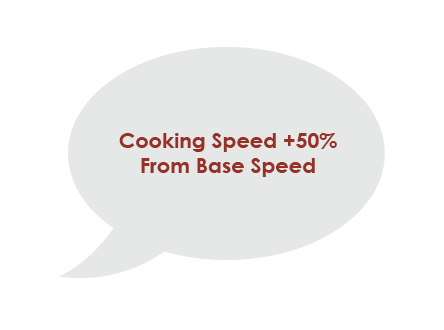
<style>
.page{position:relative;width:444px;height:330px;background:#ffffff}
.page>*{position:absolute;margin:0}
.t1{font:21px "CenturyGothic-Bold";color:#953127}
</style>
<div class="page">
<p class="t1" style="left:119px;top:133px;width:218px;height:44px;text-align:center">Cooking Speed +50%<br>From Base Speed</p>
</div>
